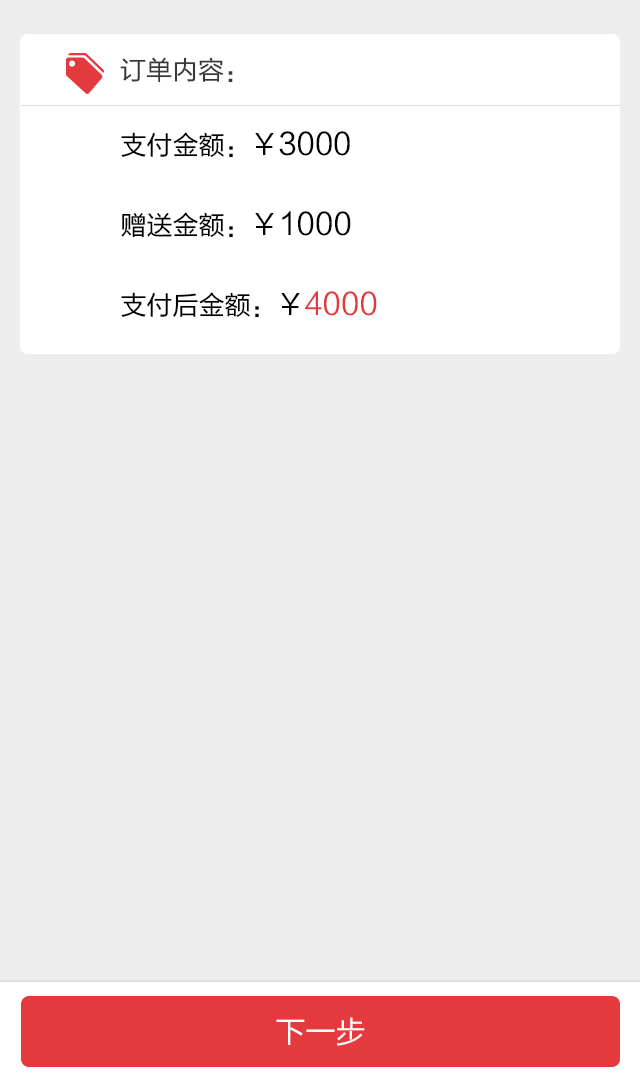
<style>
.page{position:relative;width:640px;height:1080px;background:#ededed}
.page>*{position:absolute;margin:0}
.t1{font:26px "FZLTHJW--GB1-0";color:#393939}
.t2{font:26px/80px "FZLTHJW--GB1-0";color:#000000}
.t3{font:28px/80px "FZLTHJW--GB1-0";color:#000000}
.t4{font:30px/80px "FZLTHJW--GB1-0";color:#000000}
.t5{font:30px/80px "FZLTHJW--GB1-0";color:#e43a3d}
.t6{font:30px "FZLTHJW--GB1-0";color:#ffffff}
</style>
<div class="page">
<p class="t1" style="left:120px;top:57px;width:113px;height:26px">订单内容：</p>
<p class="t2" style="left:121px;top:131px;width:256px;height:187px">支付金额：<span class="t3">￥</span><span class="t4">3000<br></span>赠送金额：<span class="t3">￥</span><span class="t4">1000<br></span>支付后金额：<span class="t3">￥</span><span class="t5">4000</span></p>
<p class="t6" style="left:276px;top:1017px;width:89px;height:29px">下一步</p>
</div>
